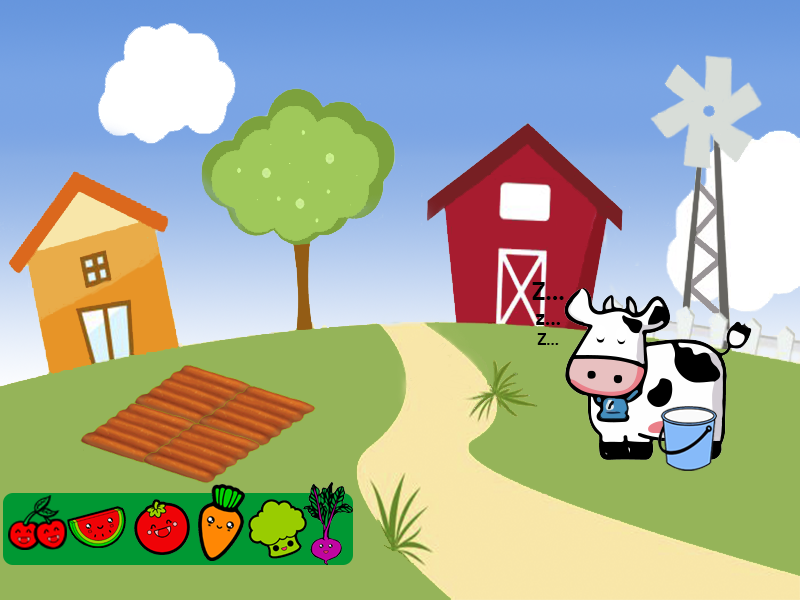
<style>
.page{position:relative;width:800px;height:600px;background:#95b459}
.page>*{position:absolute;margin:0}
.t1{font:25px "PTSans-Bold";color:#000000}
.t2{font:20.8px "PTSans-Bold";color:#000000}
.t3{font:16.7px "PTSans-Bold";color:#000000}
</style>
<div class="page">
<p class="t1" style="left:532px;top:282px;width:32px;height:63px;text-align:center">Z...<br><span class="t2">z...<br></span><span class="t3">Z...</span></p>
</div>
